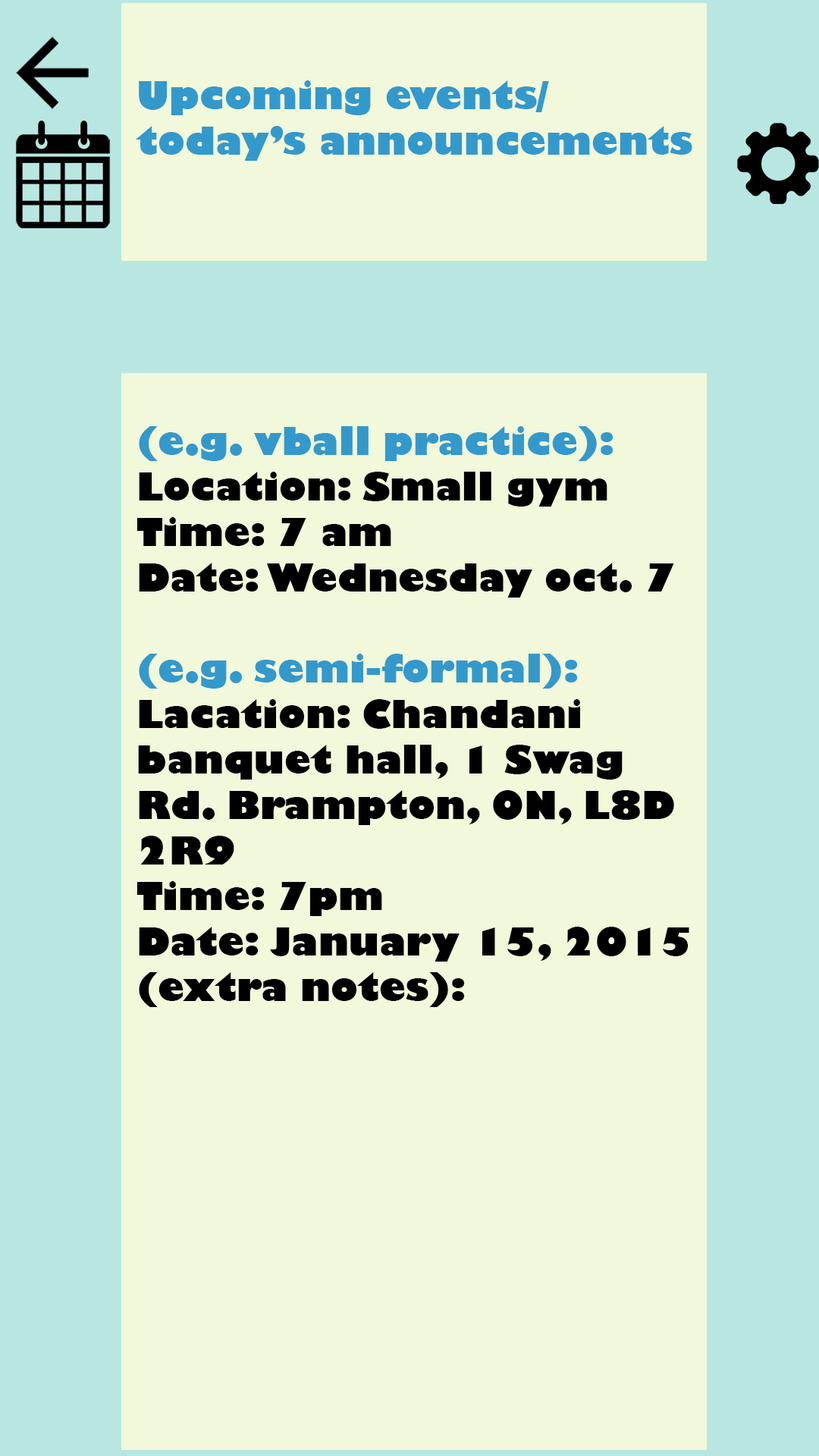
<style>
.page{position:relative;width:819px;height:1456px;background:#f2f8da}
.page>*{position:absolute;margin:0}
.t1{font:37.9px "GillSans-UltraBold";color:#3399cc}
.t2{font:37.9px "GillSans-UltraBold";color:#000000}
</style>
<div class="page">
<p class="t1" style="left:136px;top:80px;width:556px;height:81px">Upcoming events/<br>today’s announcements</p>
<p class="t2" style="left:136px;top:426px;width:553px;height:581px"><span class="t1">(e.g. vball practice):<br></span>Location: Small gym<br>Time: 7 am<br>Date: Wednesday oct. 7<br><br><span class="t1">(e.g. semi-formal):<br></span>Lacation: Chandani <br>banquet hall, 1 Swag<br>Rd. Brampton, ON, L8D<br>2R9<br>Time: 7pm<br>Date: January 15, 2015<br>(extra notes):</p>
</div>
